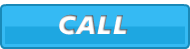
<style>
.page{position:relative;width:190px;height:49px;background:#35baf3}
.page>*{position:absolute;margin:0}
.t1{font:30px "Freight-SansBlackItalic";color:#fdfdfd;text-transform:uppercase}
</style>
<div class="page">
<p class="t1" style="left:59px;top:14px;width:69px;height:21px">CALL</p>
</div>
